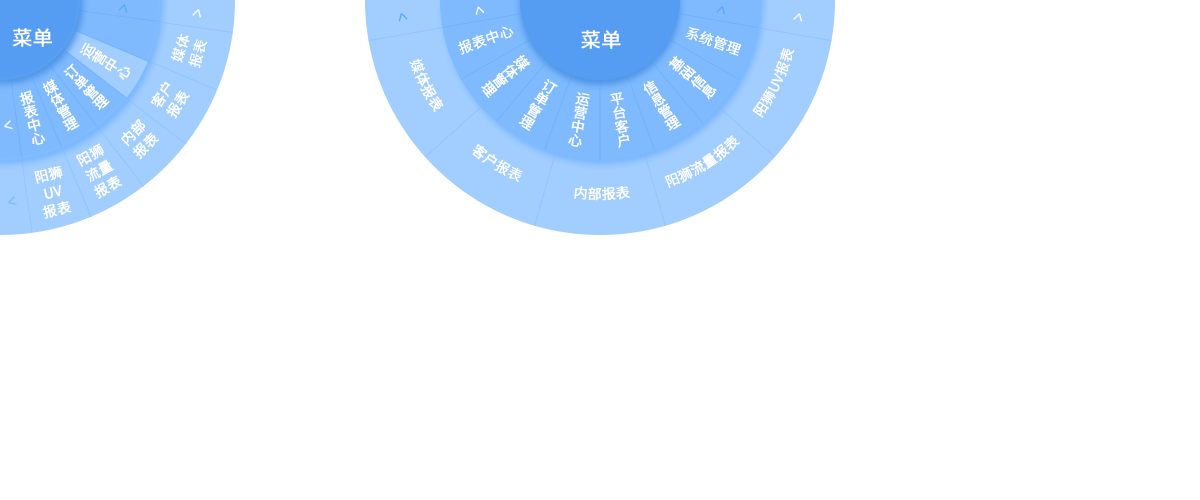
<style>
.page{position:relative;width:1200px;height:500px;background:#ffffff}
.page>*{position:absolute;margin:0}
.t1{font:20px "NotoSansHans-Regular";color:#ffffff;font-weight:bold}
.t2{font:14px "NotoSansHans-Regular";color:#ffffff;font-weight:bold}
.t3{font:14px/18px "NotoSansHans-Regular";color:#ffffff;font-weight:bold}
.t4{font:14px/14px "NotoSansHans-Regular";color:#ffffff;font-weight:bold}
</style>
<div class="page">
<p class="t1" style="left:12px;top:28px;width:40px;height:19px">菜单</p>
<p class="t2" style="left:458px;top:26px;width:56px;height:29px;rotate:-20deg">报表中心</p>
<p class="t1" style="left:581px;top:30px;width:40px;height:19px">菜单</p>
<p class="t2" style="left:685px;top:27px;width:57px;height:29px;rotate:19deg">系统管理</p>
<p class="t3" style="left:170px;top:33px;width:38px;height:36px;rotate:-73deg">媒体<br>报表</p>
<p class="t4" style="left:79px;top:42px;width:51px;height:38px;text-align:center;rotate:-59deg">运<br>营<br>中<br>心</p>
<p class="t4" style="left:63px;top:63px;width:47px;height:48px;text-align:center;rotate:-44deg">订<br>单<br>管<br>理</p>
<p class="t2" style="left:481px;top:55px;width:49px;height:43px;rotate:51deg">媒体管理</p>
<p class="t2" style="left:669px;top:55px;width:48px;height:45px;rotate:-50deg">基础信息</p>
<p class="t4" style="left:43px;top:79px;width:37px;height:53px;text-align:center;rotate:-29deg">媒<br>体<br>管<br>理</p>
<p class="t3" style="left:150px;top:81px;width:40px;height:38px;rotate:-57deg">客户<br>报表</p>
<p class="t4" style="left:518px;top:79px;width:40px;height:52px;text-align:center;rotate:32deg">订<br>单<br>管<br>理</p>
<p class="t4" style="left:643px;top:80px;width:39px;height:51px;text-align:center;rotate:-33deg">信<br>息<br>管<br>理</p>
<p class="t4" style="left:19px;top:90px;width:27px;height:55px;text-align:center;rotate:-15deg">报<br>表<br>中<br>心</p>
<p class="t4" style="left:568px;top:92px;width:22px;height:55px;text-align:center;rotate:10deg">运<br>营<br>中<br>心</p>
<p class="t4" style="left:610px;top:92px;width:20px;height:56px;text-align:center;rotate:-10deg">平<br>台<br>客<br>户</p>
<p class="t3" style="left:121px;top:119px;width:38px;height:41px;rotate:-44deg">内部<br>报表</p>
<p class="t3" style="left:76px;top:143px;width:47px;height:56px;rotate:-29deg">阳狮<br>流量<br>报表</p>
<p class="t3" style="left:34px;top:165px;width:38px;height:54px;text-align:center;rotate:-14deg">阳狮<br>UV<br>报表</p>
</div>
